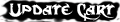
<style>
.page{position:relative;width:120px;height:22px}
.page>*{position:absolute;margin:0}
.t1{font:18px "DarkCrystalScript";color:#ffffff}
</style>
<div class="page">
<p class="t1" style="left:8px;top:3px;width:107px;height:18px">Update Cart</p>
</div>
